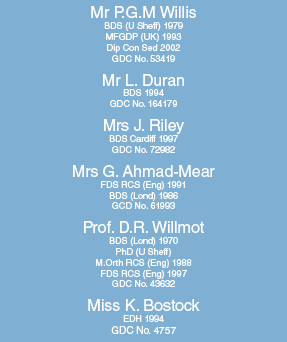
<style>
.page{position:relative;width:287px;height:342px;background:#7fafd3}
.page>*{position:absolute;margin:0}
.t1{font:9px "HelveticaLTStd-Roman";color:#ffffff}
.t2{font:16px "HelveticaLTStd-Roman";color:#ffffff}
.t3{font:10px "HelveticaLTStd-Roman";color:#ffffff}
</style>
<div class="page">
<p class="t1" style="left:73px;top:6px;width:142px;height:328px;text-align:center"><span class="t2">Mr P.G.M Willis<br></span>BDS (U Sheff) 1979<br>MFGDP (UK) 1993<br>Dip Con Sed 2002<br>GDC No. 53419<br><br><span class="t2">Mr L. Duran<br></span>BDS 1994<br>GDC No. 164179<br><br><span class="t2">Mrs J. Riley<br></span>BDS Cardiff 1997<br>GDC No. 72982<br><br><span class="t2">Mrs G. Ahmad-Mear<br></span>FDS RCS (Eng) 1991<br>BDS (Lond) 1986<br>GCD No. 61993<br><br><span class="t2">Prof. D.R. Willmot<br></span>BDS (Lond) 1970<br>PhD (U Sheff)<br>M.Orth RCS (Eng) 1988<br>FDS RCS (Eng) 1997<br>GDC No. 43632<br><br><span class="t2">Miss K. Bostock<br></span>EDH 1994<br><span class="t3">GDC No. 4757</span></p>
</div>
